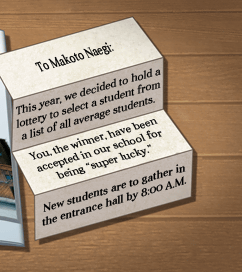
<style>
.page{position:relative;width:243px;height:272px}
.page>*{position:absolute;margin:0}
.t1{font:14.2px "Aver";color:#000000;scale:0.73 1}
.t2{font:11px "Aver";color:#000000;scale:1.04 1}
.t3{font:10.8px "Aver";color:#000000;scale:1.07 1}
.t4{font:11.1px "Aver";color:#000000;scale:1.06 1}
</style>
<div class="page">
<p class="t1" style="left:34px;top:42px;width:80px;height:30px;rotate:-16deg">To Makoto Naegi:</p>
<p class="t2" style="left:16px;top:68px;width:145px;height:72px;rotate:-16deg">This year, we decided to hold a lottery to select a student from a list of all average students.</p>
<p class="t3" style="left:28px;top:119px;width:134px;height:60px;text-align:center;rotate:-16deg">You, the winner, have been accepted in our school for<br>being “super lucky.”</p>
<p class="t4" style="left:42px;top:164px;width:145px;height:62px;rotate:-16deg">New students are to gather in the entrance hall by 8:00 A.M.</p>
</div>
